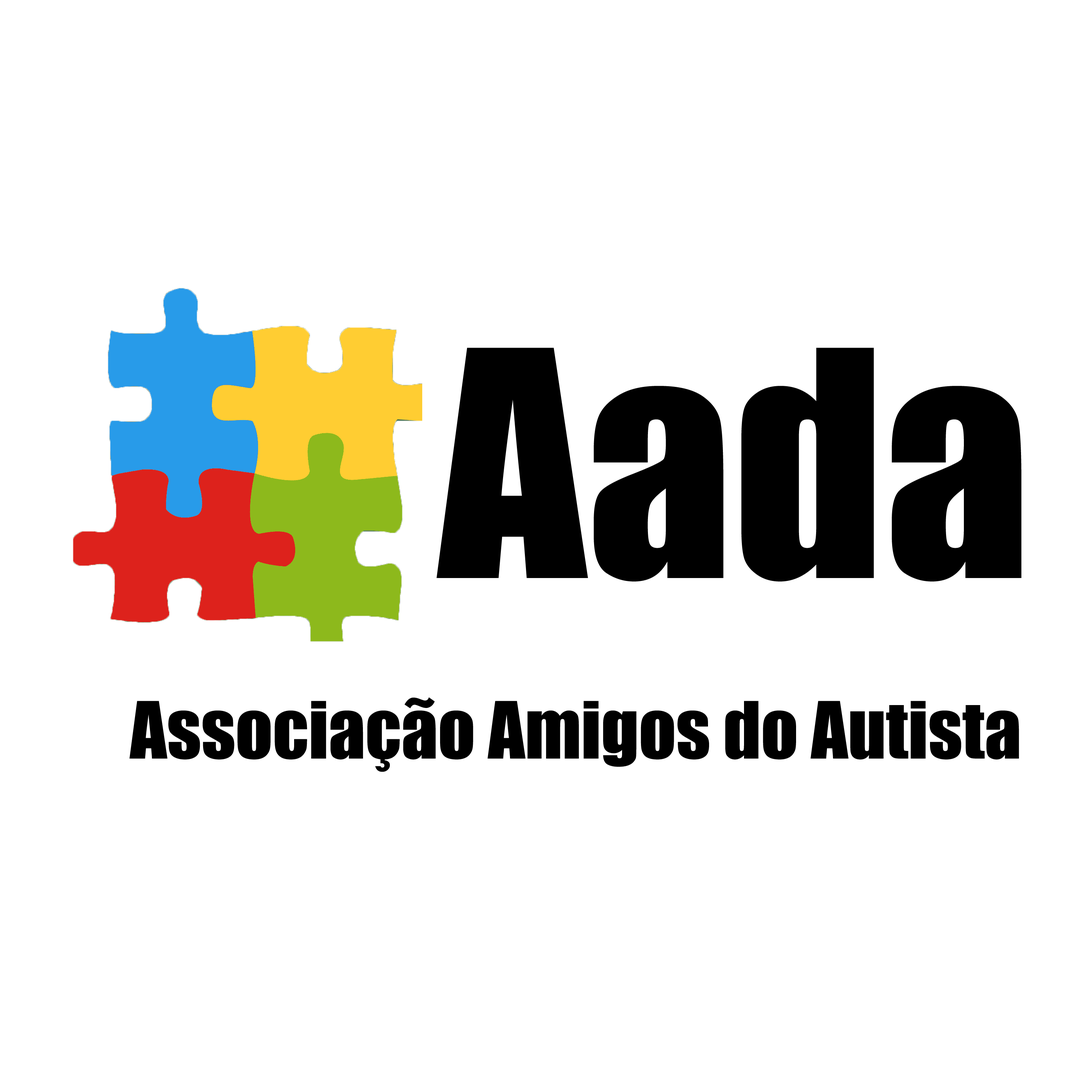
<style>
.page{position:relative;width:1092px;height:1092px;background:#ffffff}
.page>*{position:absolute;margin:0}
.t1{font:291.2px "Impact";color:#000000}
.t2{font:72.8px "Impact";color:#000000}
</style>
<div class="page">
<p class="t1" style="left:436px;top:348px;width:585px;height:234px">Aada</p>
<p class="t2" style="left:129px;top:697px;width:890px;height:75px">Associação Amigos do Autista</p>
</div>
